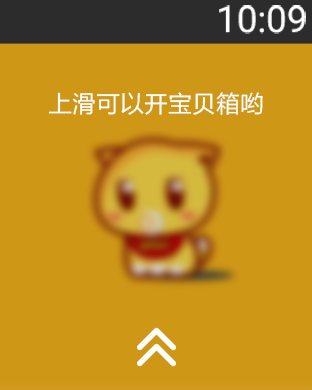
<style>
.page{position:relative;width:312px;height:390px;background:#cf9716}
.page>*{position:absolute;margin:0}
.t1{font:36.7px "Roboto-Regular";color:#ffffff}
.t2{font:24px "FZLTHK--GBK1-0";color:#ffffff}
</style>
<div class="page">
<p class="t1" style="left:219px;top:5px;width:87px;height:29px">10:09</p>
<p class="t2" style="left:48px;top:92px;width:215px;height:23px">上滑可以开宝贝箱哟</p>
</div>
